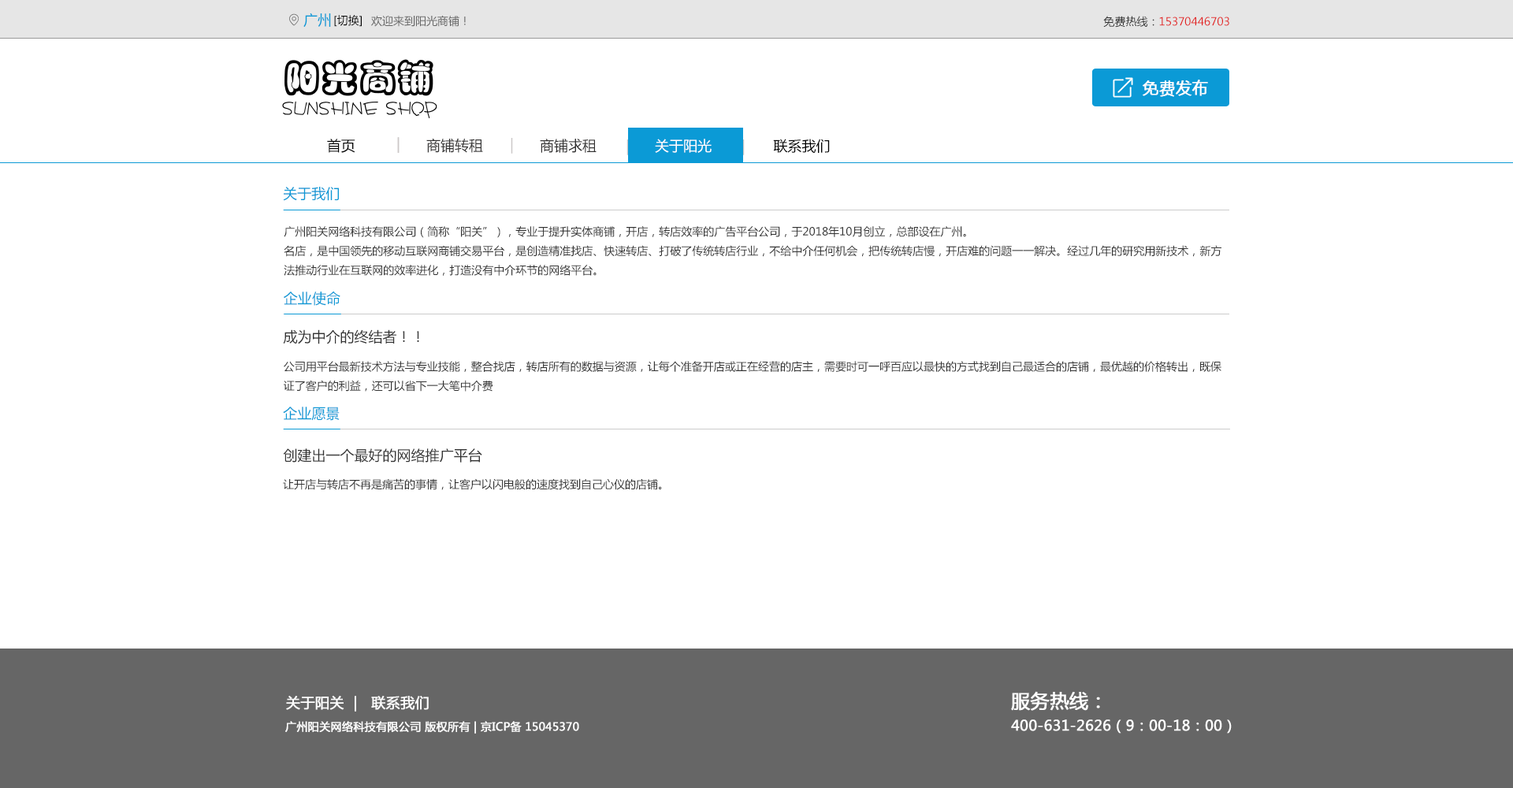
<style>
.page{position:relative;width:1513px;height:788px;background:#ffffff}
.page>*{position:absolute;margin:0}
.t1{font:14.2px "MicrosoftYaHei";color:#0b9ad6}
.t2{font:11px "MicrosoftYaHei";color:#000000}
.t3{font:11px "MicrosoftYaHei";color:#666666}
.t4{font:11px "MicrosoftYaHei";color:#e22222}
.t5{font:11px "MicrosoftYaHei";color:#333333}
.t6{font:16.2px "MicrosoftYaHei";color:#ffffff;text-transform:uppercase;font-weight:bold}
.t7{font:14.2px "MicrosoftYaHei";color:#ccc8c8}
.t8{font:14.5px "MicrosoftYaHei";color:#ccc8c8}
.t9{font:14.5px "MicrosoftYaHei";color:#333232}
.t10{font:14.2px "MicrosoftYaHei";color:#000000}
.t11{font:14.2px "MicrosoftYaHei";color:#ffffff}
.t12{font:14.2px "MicrosoftYaHei";color:#333333}
.t13{font:14.2px "MicrosoftYaHei";color:#fefefe;text-transform:uppercase;font-weight:bold}
.t14{font:18.9px "MicrosoftYaHei";color:#ffffff;text-transform:uppercase;font-weight:bold}
.t15{font:11px "MicrosoftYaHei";color:#ffffff;text-transform:uppercase;font-weight:bold}
.t16{font:14.2px "MicrosoftYaHei";color:#ffffff;text-transform:uppercase;font-weight:bold}
</style>
<div class="page">
<p class="t1" style="left:303px;top:13px;width:28px;height:15px">广州</p>
<p class="t2" style="left:334px;top:15px;width:28px;height:12px">[切换]</p>
<p class="t3" style="left:371px;top:15px;width:95px;height:12px">欢迎来到阳光商铺！</p>
<p class="t4" style="left:1103px;top:16px;width:126px;height:12px"><span class="t5">免费热线：</span>15370446703</p>
<p class="t6" style="left:1143px;top:80px;width:65px;height:17px">免费发布</p>
<p class="t7" style="left:397px;top:137px;width:3px;height:16px">|</p>
<p class="t8" style="left:397px;top:137px;width:3px;height:16px">|</p>
<p class="t9" style="left:426px;top:138px;width:57px;height:15px">商铺转租</p>
<p class="t8" style="left:511px;top:138px;width:2px;height:16px">|</p>
<p class="t10" style="left:327px;top:139px;width:28px;height:14px">首页</p>
<p class="t9" style="left:540px;top:139px;width:57px;height:14px">商铺求租</p>
<p class="t8" style="left:627px;top:139px;width:2px;height:16px">|</p>
<p class="t11" style="left:655px;top:139px;width:57px;height:14px">关于阳光</p>
<p class="t8" style="left:742px;top:139px;width:3px;height:16px">|</p>
<p class="t10" style="left:773px;top:139px;width:57px;height:14px">联系我们</p>
<p class="t1" style="left:283px;top:187px;width:56px;height:14px">关于我们</p>
<p class="t5" style="left:284px;top:226px;width:938px;height:50px">广州阳关网络科技有限公司（简称“阳关”），专业于提升实体商铺，开店，转店效率的广告平台公司，于2018年10月创立，总部设在广州。<br>名店，是中国领先的移动互联网商铺交易平台，是创造精准找店、快速转店、打破了传统转店行业，不给中介任何机会，把传统转店慢，开店难的问题一一解决。经过几年的研究用新技术，新方法推动行业在互联网的效率进化，打造没有中介环节的网络平台。</p>
<p class="t1" style="left:284px;top:292px;width:56px;height:14px">企业使命</p>
<p class="t12" style="left:283px;top:329px;width:136px;height:15px">成为中介的终结者！！</p>
<p class="t5" style="left:284px;top:361px;width:938px;height:31px"><span class="t12"><br></span>公司用平台最新技术方法与专业技能，整合找店，转店所有的数据与资源，让每个准备开店或正在经营的店主，需要时可一呼百应以最快的方式找到自己最适合的店铺，最优越的价格转出，既保证了客户的利益，还可以省下一大笔中介费</p>
<p class="t1" style="left:283px;top:407px;width:57px;height:14px">企业愿景</p>
<p class="t12" style="left:283px;top:448px;width:199px;height:15px">创建出一个最好的网络推广平台</p>
<p class="t5" style="left:283px;top:478px;width:379px;height:12px"><span class="t12"><br></span>让开店与转店不再是痛苦的事情，让客户以闪电般的速度找到自己心仪的店铺。</p>
<p class="t13" style="left:286px;top:696px;width:143px;height:16px">关于阳关  |   联系我们</p>
<p class="t14" style="left:1011px;top:691px;width:89px;height:20px">服务热线：</p>
<p class="t15" style="left:285px;top:721px;width:294px;height:13px">广州阳关网络科技有限公司 版权所有 | 京ICP备 15045370</p>
<p class="t16" style="left:1011px;top:720px;width:221px;height:14px">400-631-2626（9：00-18：00）</p>
</div>
